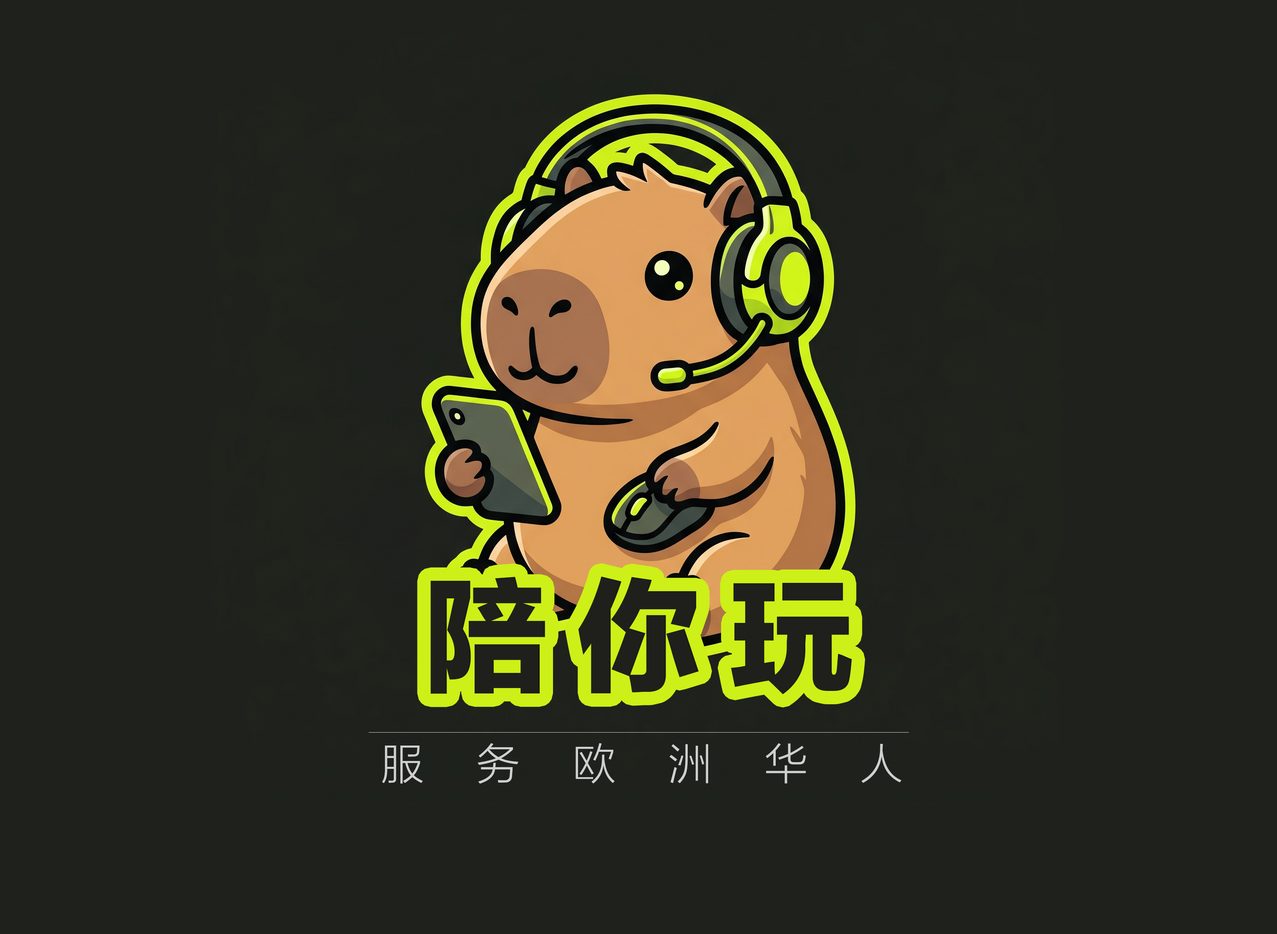
<style>
.page{position:relative;width:1277px;height:934px;background:#1f211c}
.page>*{position:absolute;margin:0}
.t1{font:125.1px "FZLTTHK--GBK1-0";letter-spacing:0.22em;color:#1f201b}
.t2{font:42.8px "FZLTXHK--GBK1-0";letter-spacing:1.24em;color:#d0d0d0}
</style>
<div class="page">
<p class="t1" style="left:430px;top:576px;width:422px;height:118px">陪你玩</p>
<p class="t2" style="left:382px;top:743px;width:519px;height:41px">服务欧洲华人</p>
</div>
